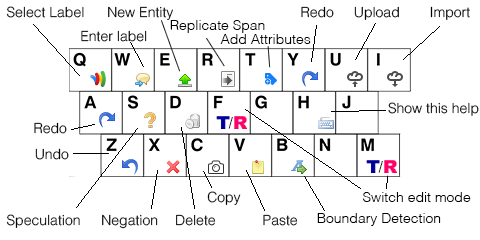
<style>
.page{position:relative;width:480px;height:240px;background:#ffffff}
.page>*{position:absolute;margin:0}
.t1{font:14px "Helvetica-Light";color:#040000}
.t2{font:14px "Helvetica-Light"}
</style>
<div class="page">
<p class="t1" style="left:6px;top:6px;width:78px;height:12px">Select Label</p>
<p class="t1" style="left:108px;top:6px;width:65px;height:14px">New Entity</p>
<p class="t1" style="left:301px;top:6px;width:33px;height:12px">Redo</p>
<p class="t1" style="left:354px;top:6px;width:45px;height:14px">Upload</p>
<p class="t1" style="left:430px;top:6px;width:40px;height:14px">Import</p>
<p class="t1" style="left:81px;top:30px;width:66px;height:12px">Enter label</p>
<p class="t1" style="left:170px;top:20px;width:95px;height:13px">Replicate Span</p>
<p class="t1" style="left:220px;top:34px;width:91px;height:10px">Add Attributes</p>
<p class="t1" style="left:388px;top:102px;width:91px;height:14px">Show this help</p>
<p class="t1" style="left:34px;top:122px;width:33px;height:12px">Redo</p>
<p class="t2" style="left:228px;top:117px;width:5px;height:12px">/</p>
<p class="t1" style="left:35px;top:148px;width:34px;height:12px">Undo</p>
<p class="t2" style="left:378px;top:161px;width:5px;height:12px">/</p>
<p class="t1" style="left:207px;top:191px;width:34px;height:14px">Copy</p>
<p class="t1" style="left:363px;top:192px;width:108px;height:10px">Switch edit mode</p>
<p class="t1" style="left:6px;top:214px;width:74px;height:14px">Speculation</p>
<p class="t1" style="left:102px;top:214px;width:56px;height:15px">Negation</p>
<p class="t2" style="left:176px;top:214px;width:40px;height:12px">Delete</p>
<p class="t2" style="left:263px;top:214px;width:35px;height:12px">Paste</p>
<p class="t1" style="left:317px;top:213px;width:124px;height:13px">Boundary Detection</p>
</div>
